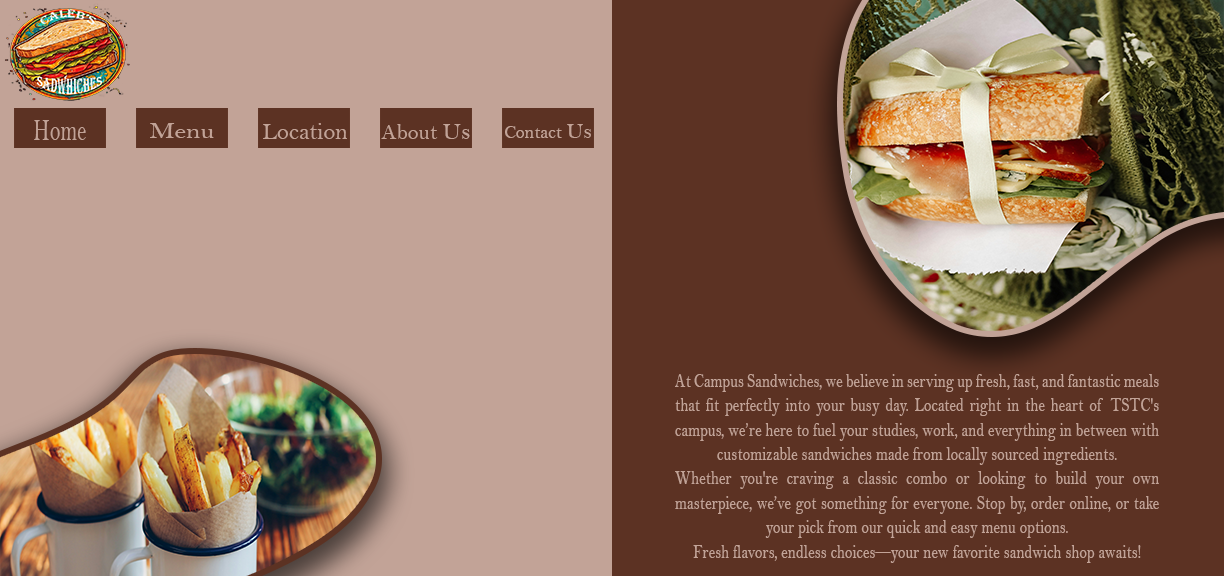
<style>
.page{position:relative;width:1224px;height:576px;background:#c2a397}
.page>*{position:absolute;margin:0}
.t1{font:31.3px "BellMT";color:#c2a397;scale:0.69 1}
.t2{font:22.7px "BellMT";color:#c2a397;scale:1.19 1}
.t3{font:24px "BellMT";color:#c2a397}
.t4{font:22px "BellMT";color:#c2a397}
.t5{font:18px "BellMT";color:#c2a397}
.t6{font:20.4px "BellMT";color:#c2a397;scale:0.75 1}
</style>
<div class="page">
<p class="t1" style="left:34px;top:120px;width:52px;height:20px">Home</p>
<p class="t2" style="left:150px;top:123px;width:64px;height:15px">Menu</p>
<p class="t3" style="left:263px;top:123px;width:84px;height:16px">Location</p>
<p class="t4" style="left:381px;top:124px;width:89px;height:15px">About <span class="t3">Us</span></p>
<p class="t5" style="left:505px;top:124px;width:86px;height:14px">Contact <span class="t4">Us</span></p>
<p class="t6" style="left:675px;top:374px;width:484px;height:189px;text-align:justify">At Campus Sandwiches, we believe in serving up fresh, fast, and fantastic meals that fit perfectly into your busy day. Located right in the heart of TSTC's campus, we’re here to fuel your studies, work, and everything in between with customizable sandwiches made from locally sourced ingredients.<br>Whether you're craving a classic combo or looking to build your own masterpiece, we’ve got something for everyone. Stop by, order online, or take your pick from our quick and easy menu options.<br>Fresh flavors, endless choices—your new favorite sandwich shop awaits!</p>
</div>
